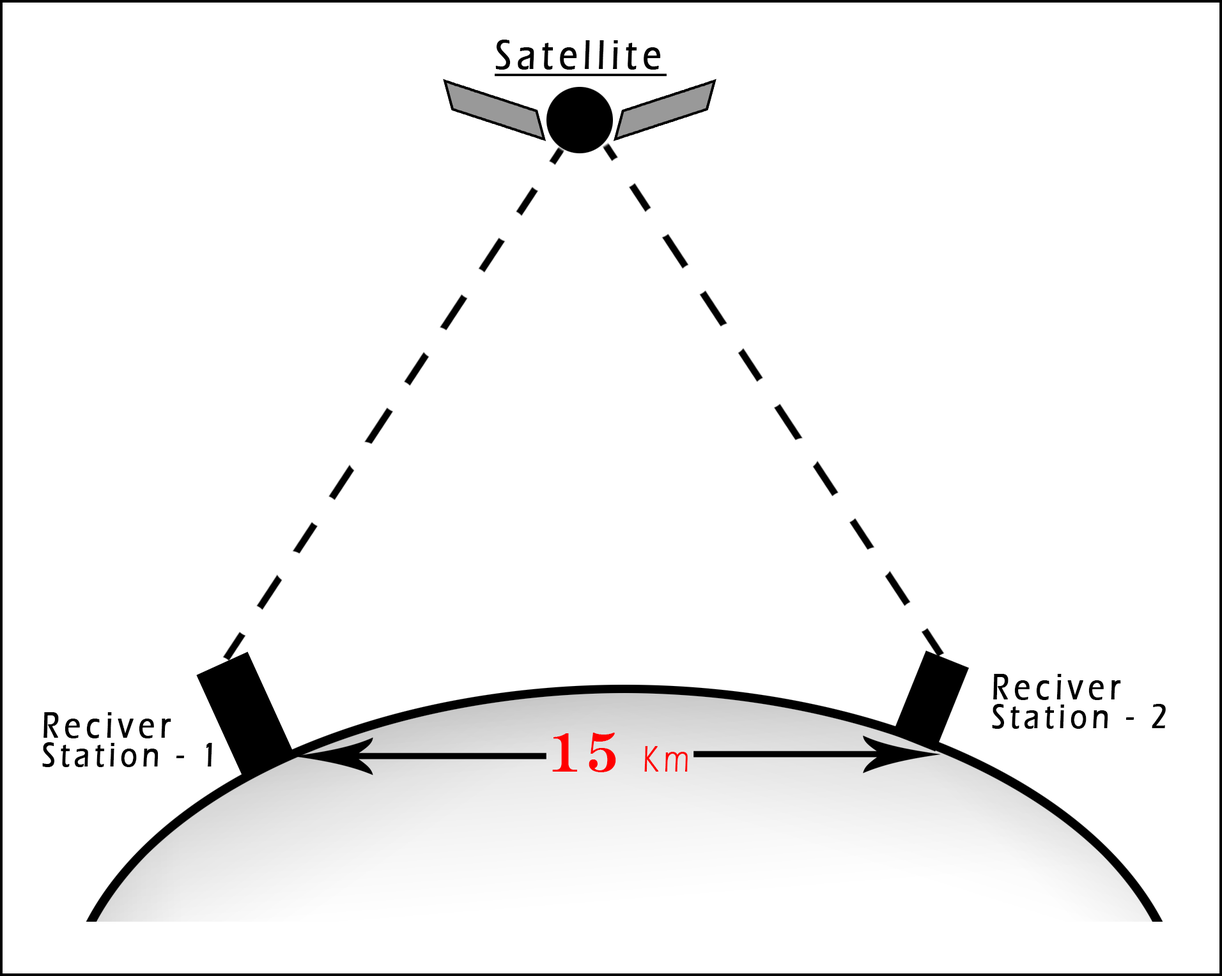
<style>
.page{position:relative;width:1222px;height:976px;background:#ffffff}
.page>*{position:absolute;margin:0}
.t1{font:41.9px "ErasITC-Medium";letter-spacing:0.16em;color:#000000;font-weight:bold;text-decoration:underline;scale:0.81 1}
.t2{font:34.6px/29.3px "ErasITC-Medium";letter-spacing:0.16em;color:#000000;font-weight:bold;scale:0.81 1}
.t3{font:37px/29.3px "ErasITC-Medium";letter-spacing:0.16em;color:#000000;font-weight:bold;scale:0.81 1}
.t4{font:54.7px "EngraversMT";letter-spacing:0.16em;color:#ff0000;font-weight:bold;scale:0.81 1}
.t5{font:37.8px "ErasITC-Light";letter-spacing:0.16em;color:#ff0000;font-weight:bold;scale:0.81 1}
</style>
<div class="page">
<p class="t1" style="left:494px;top:40px;width:172px;height:37px">Satellite</p>
<p class="t2" style="left:992px;top:674px;width:173px;height:55px"><span class="t3">Reciver<br></span>Station - 2</p>
<p class="t2" style="left:42px;top:712px;width:170px;height:55px"><span class="t3">Reciver<br></span>Station - 1</p>
<p class="t4" style="left:552px;top:733px;width:135px;height:39px">15 <span class="t5">Km</span></p>
</div>
